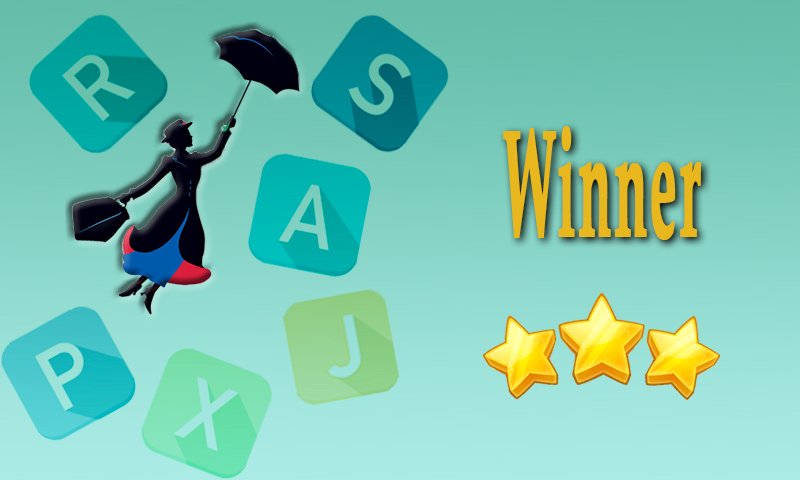
<style>
.page{position:relative;width:800px;height:480px}
.page>*{position:absolute;margin:0}
.t1{font:152.4px "PalatinoLinotype-Bold";letter-spacing:0.04em;color:#e8b71d;font-weight:bold;scale:0.35 1}
</style>
<div class="page">
<p class="t1" style="left:503px;top:126px;width:198px;height:114px">Winner</p>
</div>
